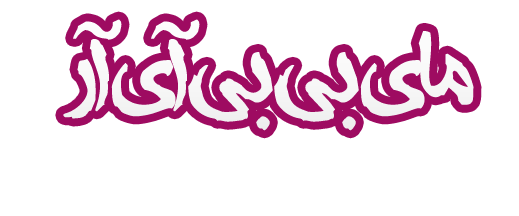
<style>
.page{position:relative;width:519px;height:216px;background:#ffffff}
.page>*{position:absolute;margin:0}
.t1{font:100px "AAfsaneh";letter-spacing:-0.06em;color:#f6f6f6}
</style>
<div class="page">
<p class="t1" style="left:63px;top:19px;width:411px;height:112px">مای بی بی آی آر</p>
</div>
